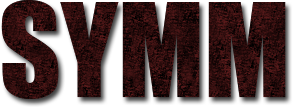
<style>
.page{position:relative;width:293px;height:107px}
.page>*{position:absolute;margin:0}
.t1{font:120px "Impact";color:#2b0c0c}
</style>
<div class="page">
<p class="t1" style="left:1px;top:0px;width:285px;height:99px">SYMM</p>
<p class="t1" style="left:1px;top:0px;width:285px;height:99px">SYMM</p>
</div>
